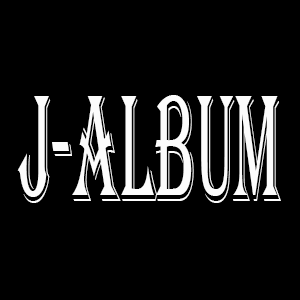
<style>
.page{position:relative;width:300px;height:300px;background:#000000}
.page>*{position:absolute;margin:0}
.t1{font:157.4px "Algerian";color:#fcfcfc;scale:0.4 1}
</style>
<div class="page">
<p class="t1" style="left:17px;top:95px;width:264px;height:108px">J-AlbUM</p>
</div>
